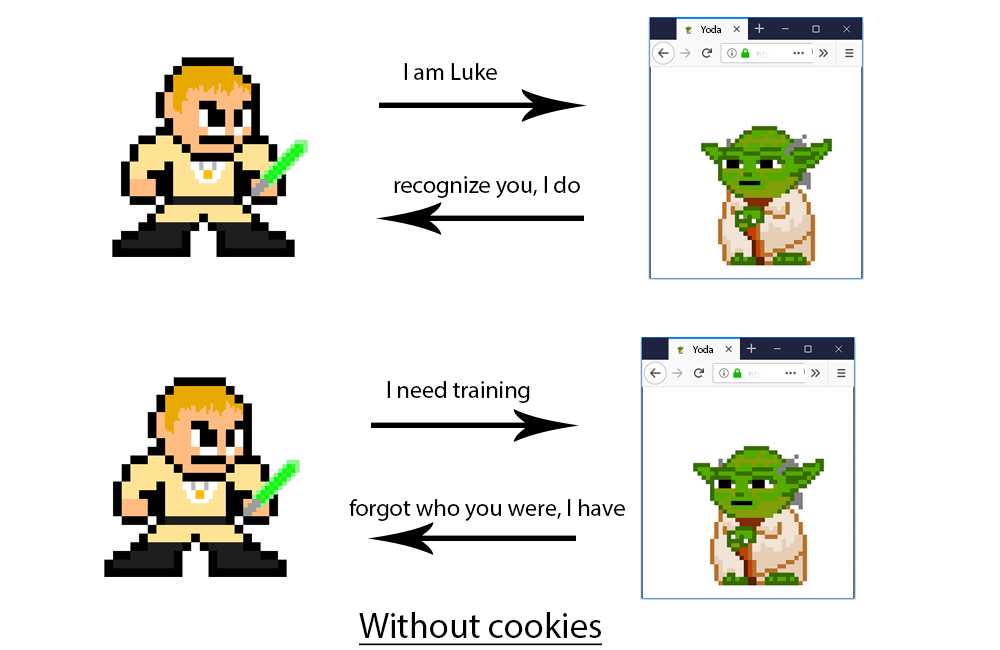
<style>
.page{position:relative;width:1000px;height:650px;background:#ffffff}
.page>*{position:absolute;margin:0}
.t1{font:10px "MyriadPro-Regular";color:#000000}
.t2{font:24px "MyriadPro-Regular";color:#000000}
.t3{font:36px "MyriadPro-Regular";color:#000000;text-decoration:underline}
</style>
<div class="page">
<p class="t1" style="left:700px;top:25px;width:21px;height:8px">Yoda</p>
<p class="t2" style="left:404px;top:63px;width:93px;height:17px">I am Luke</p>
<p class="t2" style="left:394px;top:176px;width:186px;height:22px">recognize you, I do</p>
<p class="t1" style="left:692px;top:345px;width:21px;height:8px">Yoda</p>
<p class="t2" style="left:387px;top:381px;width:143px;height:22px">I need training</p>
<p class="t2" style="left:349px;top:499px;width:276px;height:22px">forgot who you were, I have</p>
<p class="t3" style="left:359px;top:612px;width:243px;height:34px">Without cookies</p>
</div>
